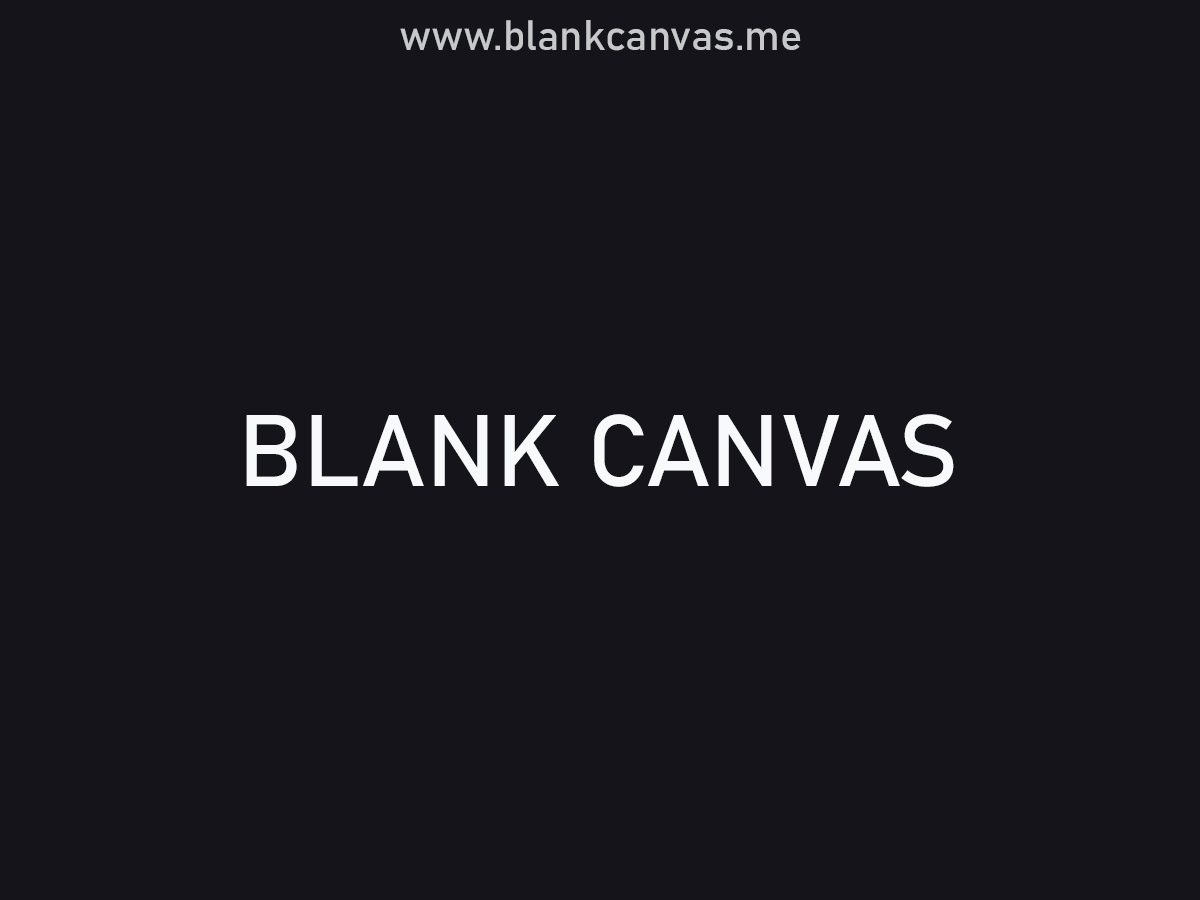
<style>
.page{position:relative;width:1200px;height:900px;background:#14141a}
.page>*{position:absolute;margin:0}
.t1{font:41.7px "Bahnschrift";color:#c7c8ca}
.t2{font:100px "Bahnschrift";color:#f8f9fa}
</style>
<div class="page">
<p class="t1" style="left:400px;top:20px;width:401px;height:31px">www.blankcanvas.me</p>
<p class="t2" style="left:246px;top:414px;width:708px;height:73px">BLANK CANVAS</p>
</div>
